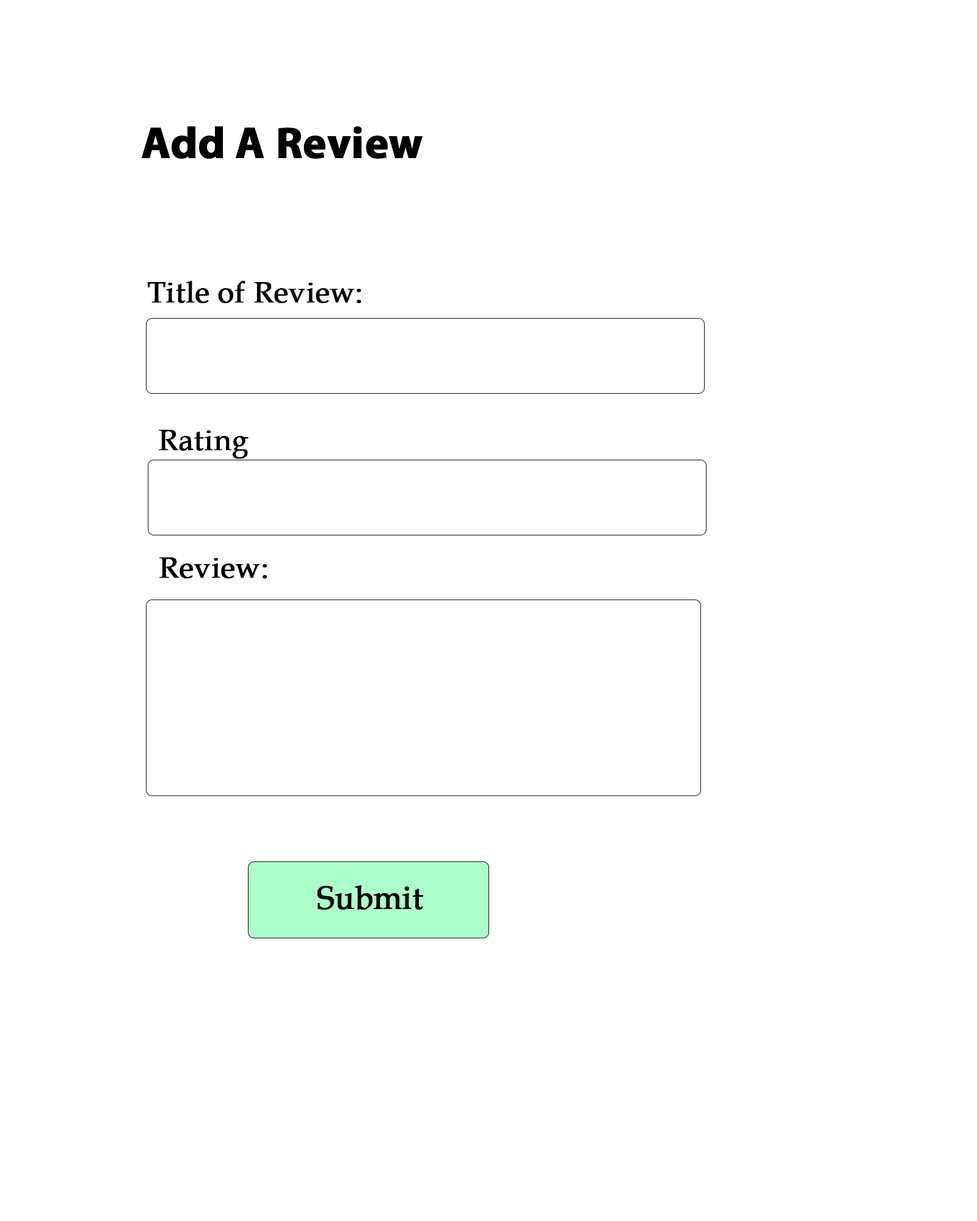
<style>
.page{position:relative;width:977px;height:1221px;background:#ffffff}
.page>*{position:absolute;margin:0}
.t1{font:44px "MyriadPro-Bold";color:#000000;font-weight:bold}
.t2{font:29.3px "BookAntiqua";color:#000000;font-weight:bold}
.t3{font:31.7px "BookAntiqua";color:#000000;font-weight:bold}
</style>
<div class="page">
<p class="t1" style="left:142px;top:126px;width:280px;height:33px">Add A Review</p>
<p class="t2" style="left:147px;top:281px;width:214px;height:22px">Title of Review:</p>
<p class="t2" style="left:159px;top:430px;width:89px;height:29px">Rating</p>
<p class="t2" style="left:159px;top:557px;width:108px;height:22px">Review:</p>
<p class="t3" style="left:317px;top:885px;width:106px;height:25px">Submit</p>
</div>
